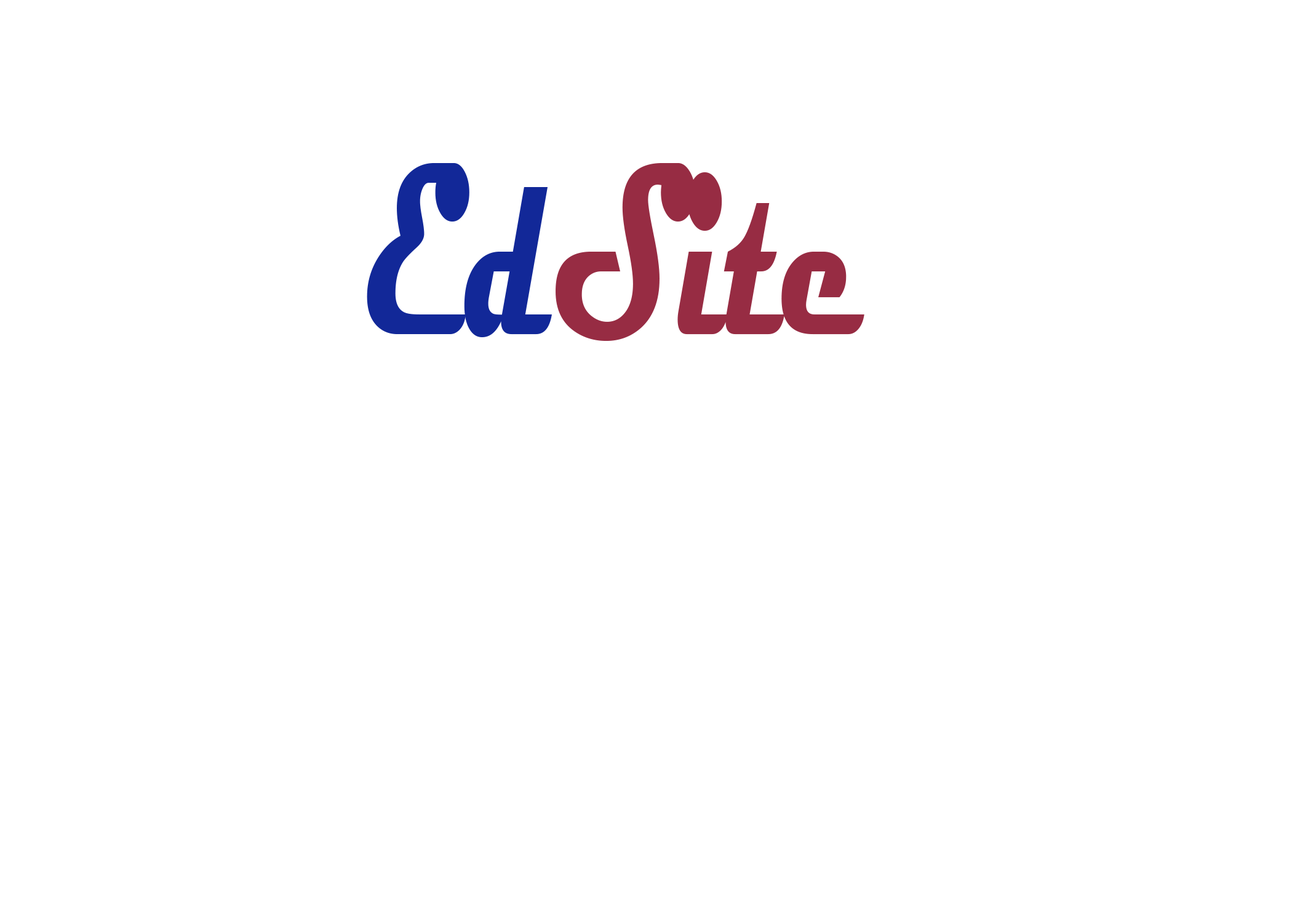
<style>
.page{position:relative;width:1292px;height:923px;background:#ffffff}
.page>*{position:absolute;margin:0}
.t1{font:249.2px "Magneto-Bold";color:#972c43;scale:0.53 1}
.t2{font:249.2px "Magneto-Bold";color:#122898;scale:0.53 1}
</style>
<div class="page">
<p class="t1" style="left:367px;top:163px;width:497px;height:178px"><span class="t2">Ed</span>Site</p>
</div>
